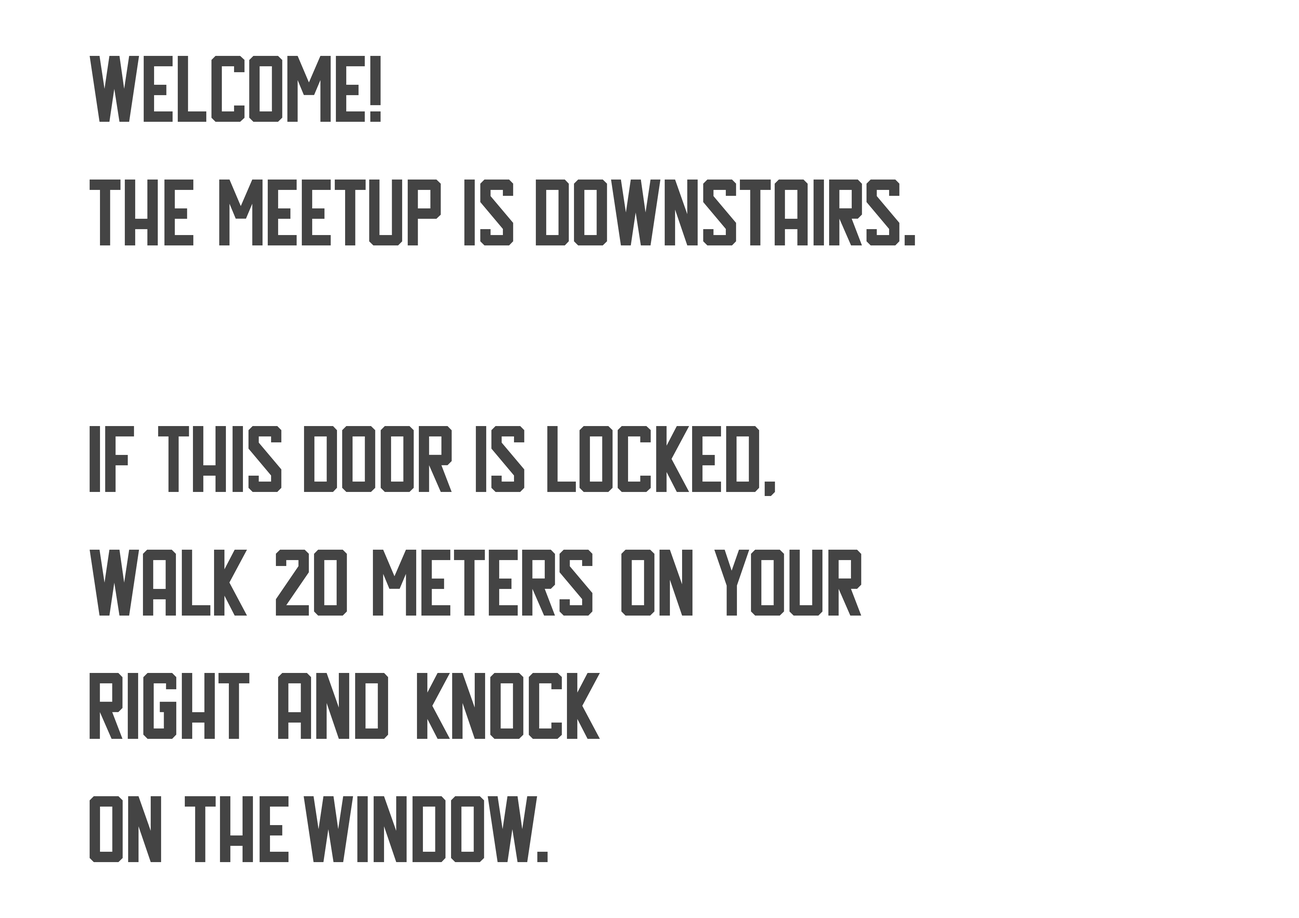
<style>
.page{position:relative;width:1299px;height:918px;background:#ffffff}
.page>*{position:absolute;margin:0}
.t1{font:94.1px/123.4px "Hal-Hal";color:#444444}
</style>
<div class="page">
<p class="t1" style="left:90px;top:56px;width:825px;height:806px">WELCOME!<br>THE MEETUP IS DOWNSTAIRS.<br><br>IF THIS DOOR IS LOCKEd,<br>WALK 20 METERS ON YOUR<br>RIGHT AND KNOCK <br>ON THE WINDOW.</p>
</div>
